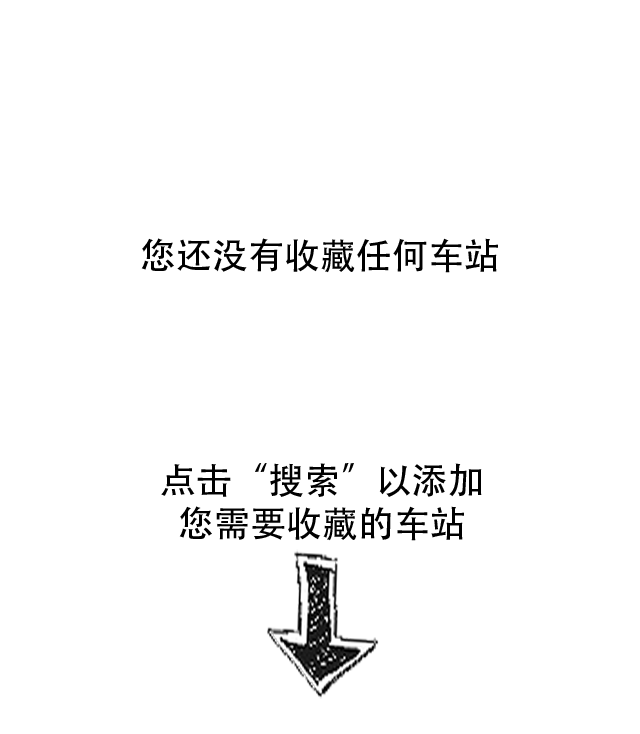
<style>
.page{position:relative;width:640px;height:734px;background:#ffffff}
.page>*{position:absolute;margin:0}
.t1{font:36px "AdobeHeitiStd-Regular";color:#000000}
</style>
<div class="page">
<p class="t1" style="left:141px;top:238px;width:357px;height:35px">您还没有收藏任何车站</p>
<p class="t1" style="left:161px;top:463px;width:321px;height:78px;text-align:center">点击“搜索”以添加<br>您需要收藏的车站</p>
</div>
